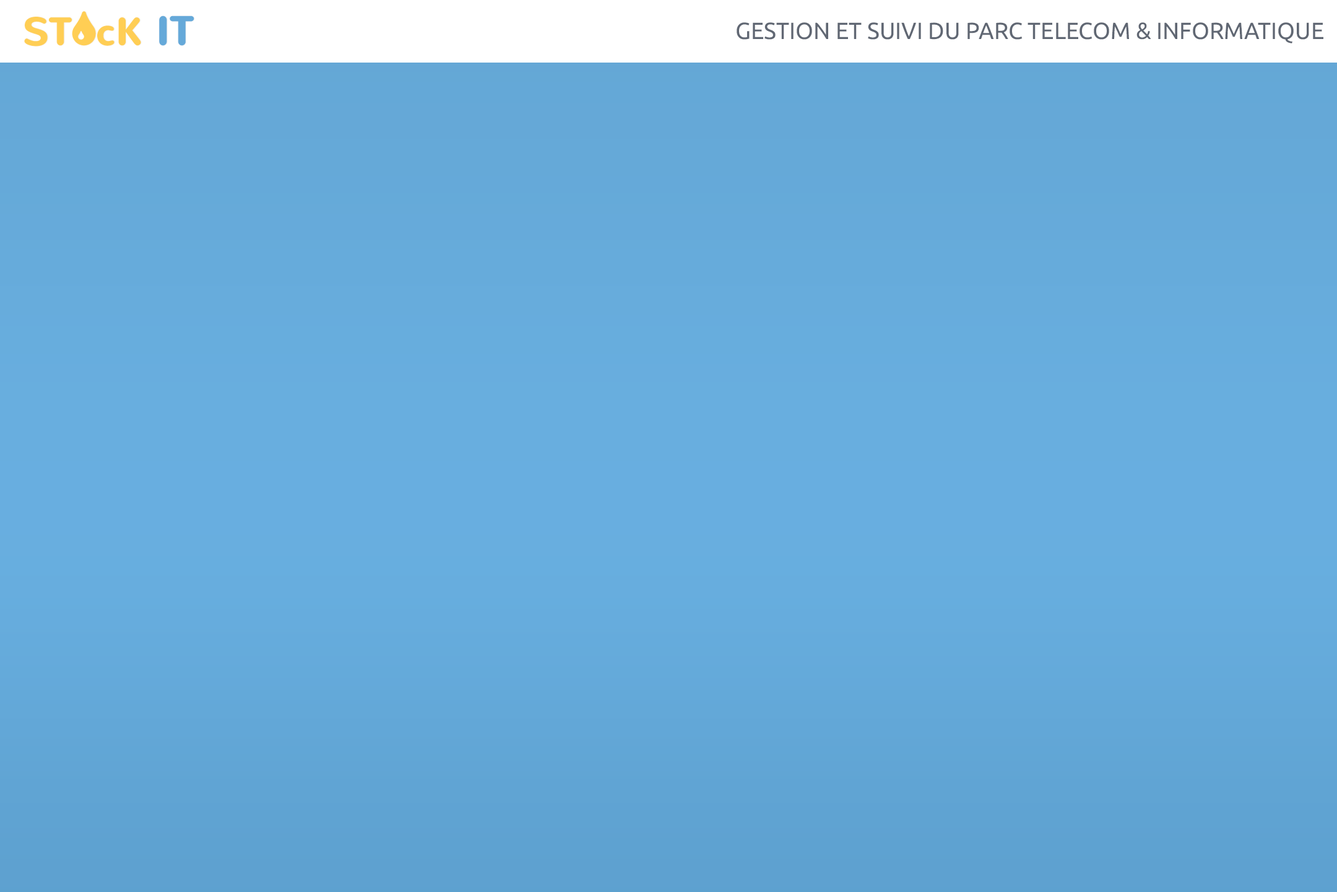
<style>
.page{position:relative;width:1337px;height:892px}
.page>*{position:absolute;margin:0}
.t1{font:23.3px "Ubuntu";color:#606773;text-transform:uppercase}
</style>
<div class="page">
<p class="t1" style="left:737px;top:22px;width:587px;height:21px">GESTION ET SUIVI DU PARC TELECOM &amp; INFORMATIQUE</p>
</div>
